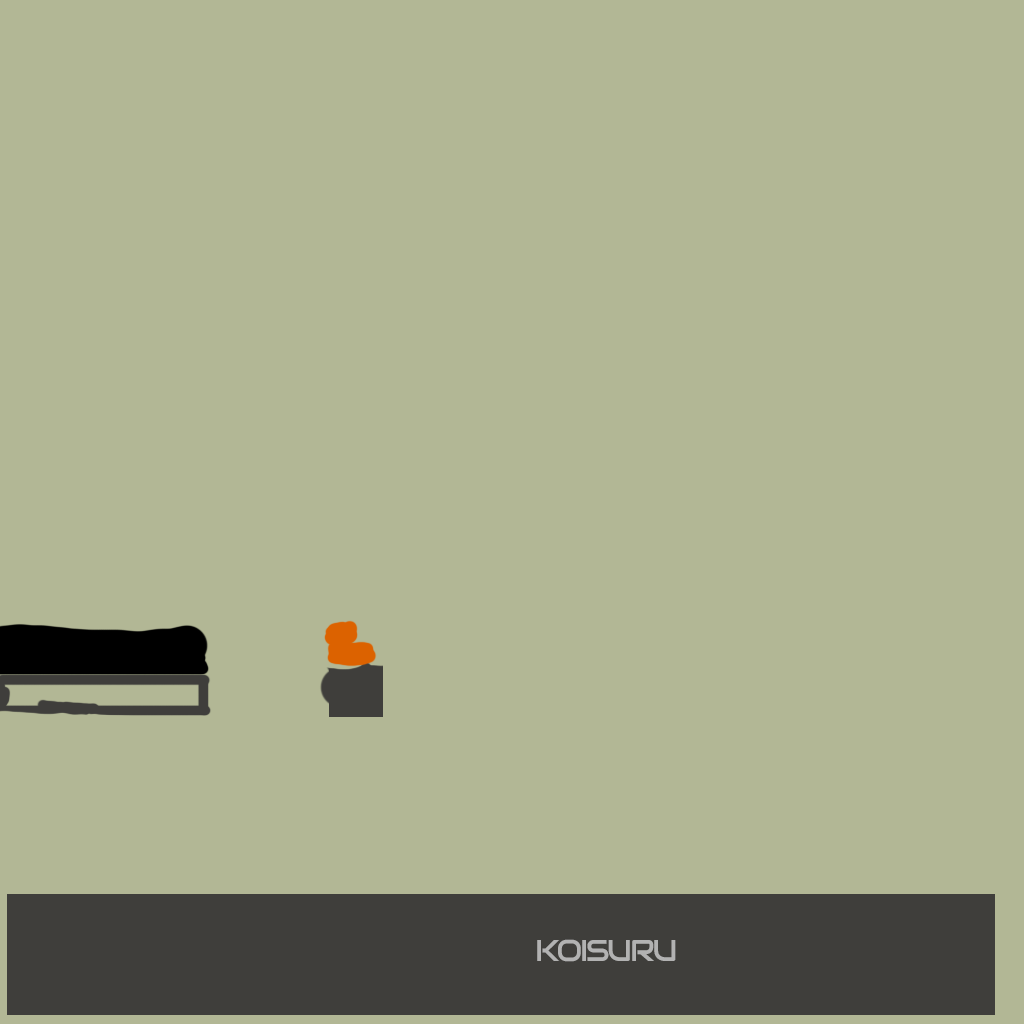
<style>
.page{position:relative;width:1024px;height:1024px;background:#b2b795}
.page>*{position:absolute;margin:0}
.t1{font:30px "Audiowide-Regular";letter-spacing:-0.075em;color:#b2b2b2}
</style>
<div class="page">
<p class="t1" style="left:537px;top:939px;width:139px;height:23px">KOISURU</p>
</div>
